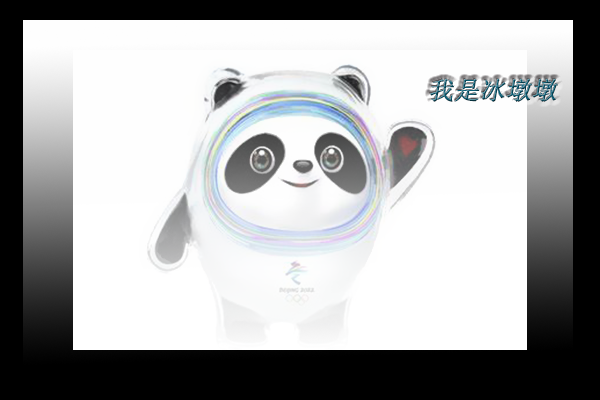
<style>
.page{position:relative;width:600px;height:400px;background:#000000}
.page>*{position:absolute;margin:0}
.t1{font:25px "SimSun";font-weight:bold;font-style:italic}
</style>
<div class="page">
<p class="t1" style="left:430px;top:78px;width:128px;height:24px">我是冰墩墩</p>
</div>
